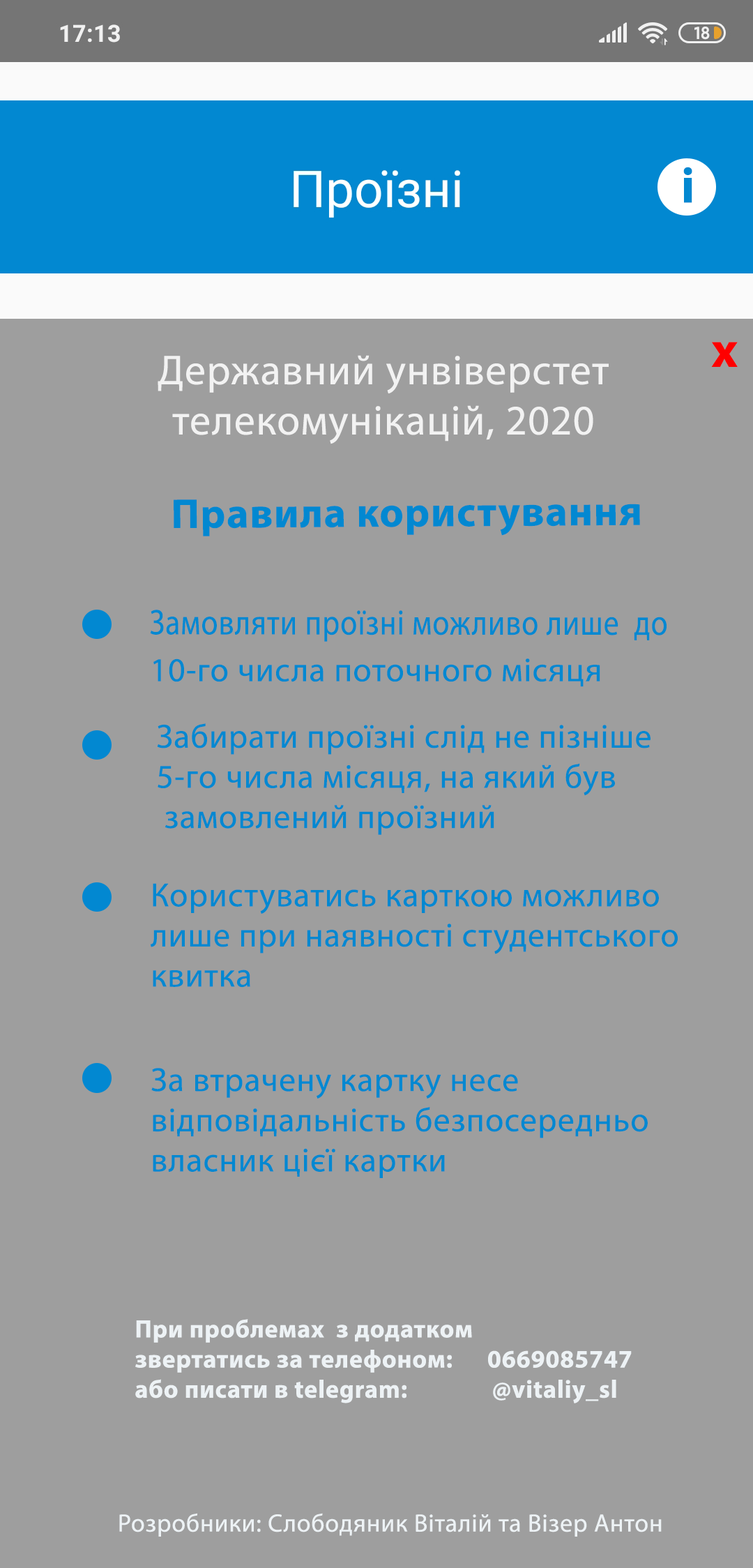
<style>
.page{position:relative;width:753px;height:1568px;background:#9e9e9e}
.page>*{position:absolute;margin:0}
.t1{font:50.2px "MyriadPro-Bold";letter-spacing:0.075em;color:#0288d1}
.t2{font:50.2px "MyriadPro-Bold";letter-spacing:0.025em;color:#fe0000}
.t3{font:41.9px "MyriadPro-Regular";letter-spacing:0.025em;color:#f2f2f2}
.t4{font:41.9px "MyriadPro-Bold";letter-spacing:0.025em;color:#0288d1}
.t5{font:35.5px "MyriadPro-Regular";letter-spacing:0.025em;color:#0288d1;scale:0.86 1}
.t6{font:33.5px "MyriadPro-Regular";letter-spacing:0.025em;color:#0288d1}
.t7{font:25.1px "MyriadPro-Bold";letter-spacing:0.025em;color:#edf2f5}
.t8{font:25.1px "MyriadPro-Regular";letter-spacing:0.025em;color:#edf2f5}
</style>
<div class="page">
<p class="t1" style="left:684px;top:167px;width:9px;height:36px">і</p>
<p class="t2" style="left:711px;top:342px;width:27px;height:25px">x</p>
<p class="t3" style="left:158px;top:355px;width:451px;height:89px;text-align:center">Державний унвіверстет <br>телекомунікацій, 2020</p>
<p class="t4" style="left:174px;top:499px;width:466px;height:37px">Правила користування</p>
<p class="t5" style="left:150px;top:610px;width:517px;height:32px">Замовляти проїзні можливо лише  до</p>
<p class="t6" style="left:153px;top:658px;width:448px;height:29px">10-го числа поточного місяця</p>
<p class="t6" style="left:157px;top:723px;width:494px;height:112px">Забирати проїзні слід не пізніше <br>5-го числа місяця, на який був<br> замовлений проїзний</p>
<p class="t6" style="left:151px;top:883px;width:527px;height:105px">Користуватись карткою можливо<br>лише при наявності студентського<br>квитка</p>
<p class="t6" style="left:151px;top:1068px;width:497px;height:110px">За втрачену картку несе <br>відповідальність безпосередньо <br>власник цієї картки</p>
<p class="t7" style="left:135px;top:1319px;width:497px;height:84px">При проблемах  з додатком <br>звертатись за телефоном:      0669085747<br>або писати в telegram:        @vitaliy_sl</p>
<p class="t8" style="left:119px;top:1513px;width:543px;height:24px">Розробники: Слободяник Віталій та Візер Антон</p>
</div>
